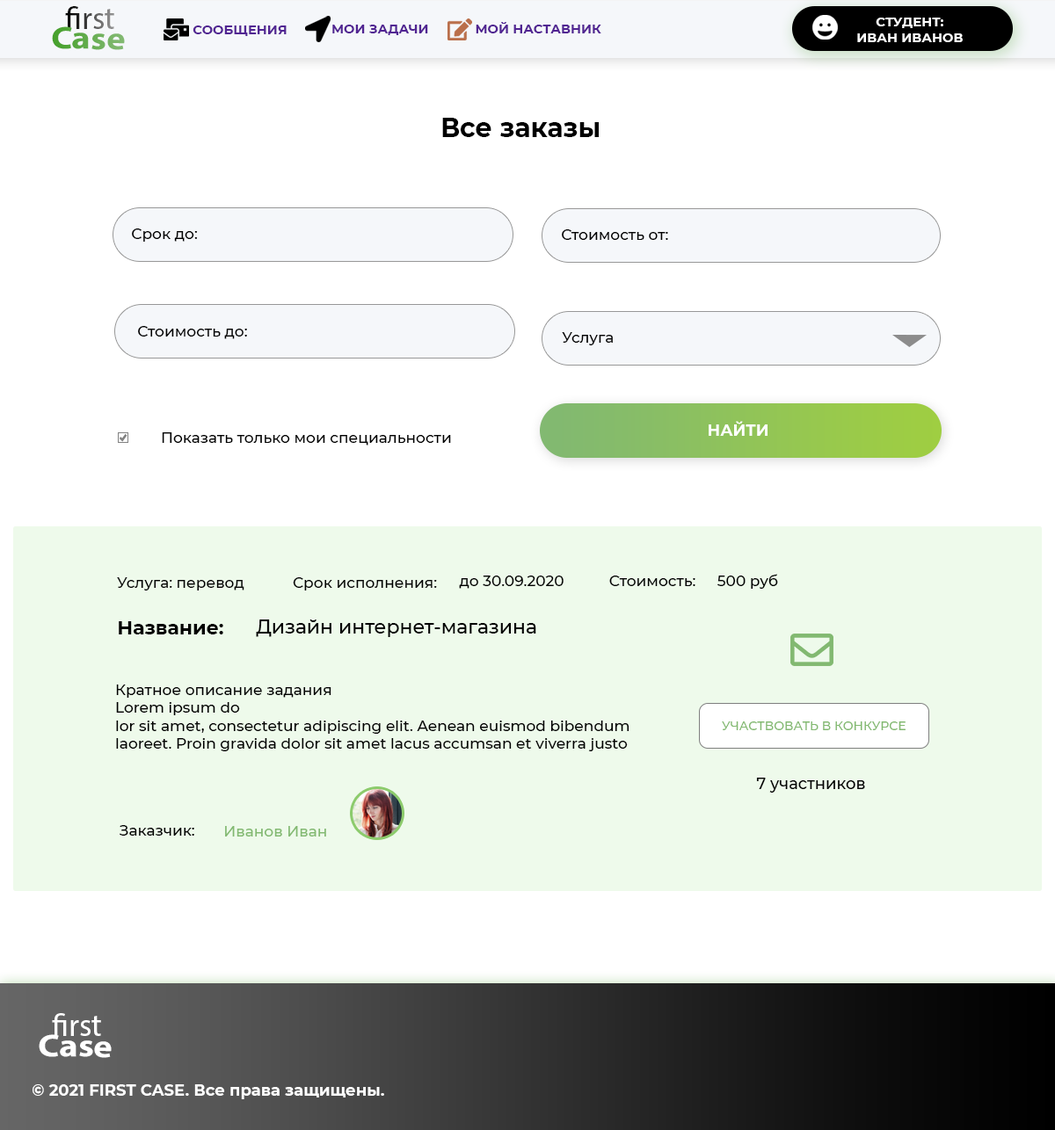
<style>
.page{position:relative;width:1055px;height:1130px;background:#ffffff}
.page>*{position:absolute;margin:0}
.t1{font:31.6px "MyriadPro-Regular"}
.t2{font:12.9px "Montserrat-Bold";color:#ffffff;text-transform:uppercase}
.t3{font:31.6px "MyriadPro-Bold";scale:1.13 1}
.t4{font:31.9px "MyriadPro-Regular";scale:1.13 1}
.t5{font:12.9px "Montserrat-Bold";color:#512592;text-transform:uppercase}
.t6{font:12.9px "Montserrat-Bold";color:#512492;text-transform:uppercase}
.t7{font:26.4px "Montserrat-Bold";color:#000000}
.t8{font:14.9px "Montserrat-Medium";color:#000000}
.t9{font:15.8px "Montserrat-Bold";color:#ffffff;text-transform:uppercase}
.t10{font:19.3px "Montserrat-Bold";color:#000000}
.t11{font:19.3px "Montserrat-Medium";color:#000000}
.t12{font:12.3px "Montserrat-Medium";color:#82b970;text-transform:uppercase}
.t13{font:15.8px "Montserrat-Medium";color:#000000}
.t14{font:14.9px "Montserrat-Medium";color:#82b971}
.t15{font:31.6px "MyriadPro-Regular";color:#ffffff}
.t16{font:31.6px "MyriadPro-Bold";color:#ffffff;scale:1.13 1}
.t17{font:31.7px "MyriadPro-Regular";color:#ffffff;scale:1.13 1}
.t18{font:15.8px "Montserrat-Bold";color:#ffffff}
</style>
<div class="page">
<p class="t1" style="left:65px;top:6px;width:49px;height:23px">first</p>
<p class="t2" style="left:857px;top:18px;width:106px;height:24px;text-align:center">студент:<br>иВАН иВАНОВ</p>
<p class="t3" style="left:52px;top:26px;width:73px;height:24px;rotate:1deg"><span class="t4">       </span>Case</p>
<p class="t5" style="left:193px;top:25px;width:94px;height:11px">СООБЩЕНИЯ</p>
<p class="t6" style="left:332px;top:25px;width:96px;height:10px">МОИ задачи</p>
<p class="t6" style="left:476px;top:22px;width:125px;height:11px">мой наставник</p>
<p class="t7" style="left:442px;top:118px;width:157px;height:19px">Все заказы</p>
<p class="t8" style="left:132px;top:229px;width:66px;height:13px">Срок до:</p>
<p class="t8" style="left:562px;top:229px;width:106px;height:11px">Стоимость от:</p>
<p class="t8" style="left:138px;top:326px;width:109px;height:13px">Стоимость до:</p>
<p class="t8" style="left:562px;top:332px;width:51px;height:13px">Услуга</p>
<p class="t9" style="left:709px;top:421px;width:58px;height:15px">найти</p>
<p class="t8" style="left:162px;top:432px;width:289px;height:14px">Показать только мои специальности</p>
<p class="t8" style="left:117px;top:578px;width:127px;height:13px">Услуга: перевод</p>
<p class="t8" style="left:293px;top:578px;width:144px;height:13px">Срок исполнения:</p>
<p class="t8" style="left:459px;top:576px;width:104px;height:13px">до 30.09.2020</p>
<p class="t8" style="left:609px;top:576px;width:86px;height:10px">Стоимость:</p>
<p class="t8" style="left:717px;top:574px;width:61px;height:15px">500 руб</p>
<p class="t10" style="left:119px;top:621px;width:104px;height:14px">Название:</p>
<p class="t11" style="left:256px;top:620px;width:280px;height:17px">Дизайн интернет-магазина</p>
<p class="t8" style="left:116px;top:685px;width:513px;height:67px">Кратное описание задания<br>Lorem ipsum do<br>lor sit amet, consectetur adipiscing elit. Aenean euismod bibendum laoreet. Proin gravida dolor sit amet lacus accumsan et viverra justo commodo.</p>
<p class="t12" style="left:722px;top:722px;width:183px;height:8px">Участвовать в конкурсе</p>
<p class="t13" style="left:756px;top:778px;width:109px;height:15px">7 участников</p>
<p class="t8" style="left:120px;top:825px;width:74px;height:11px">Заказчик:</p>
<p class="t14" style="left:225px;top:826px;width:101px;height:11px">Иванов Иван</p>
<p class="t15" style="left:52px;top:1014px;width:49px;height:22px">first</p>
<p class="t16" style="left:39px;top:1035px;width:73px;height:23px;rotate:1deg"><span class="t17">       </span>Case</p>
<p class="t18" style="left:33px;top:1085px;width:351px;height:15px">© 2021 FIRST CASE. Все права защищены.</p>
</div>
